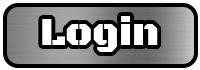
<style>
.page{position:relative;width:200px;height:70px;background:#ffffff}
.page>*{position:absolute;margin:0}
.t1{font:40.6px "BlackOpsOne-Regular";color:#ffffff}
</style>
<div class="page">
<p class="t1" style="left:42px;top:16px;width:116px;height:36px">Login</p>
</div>
